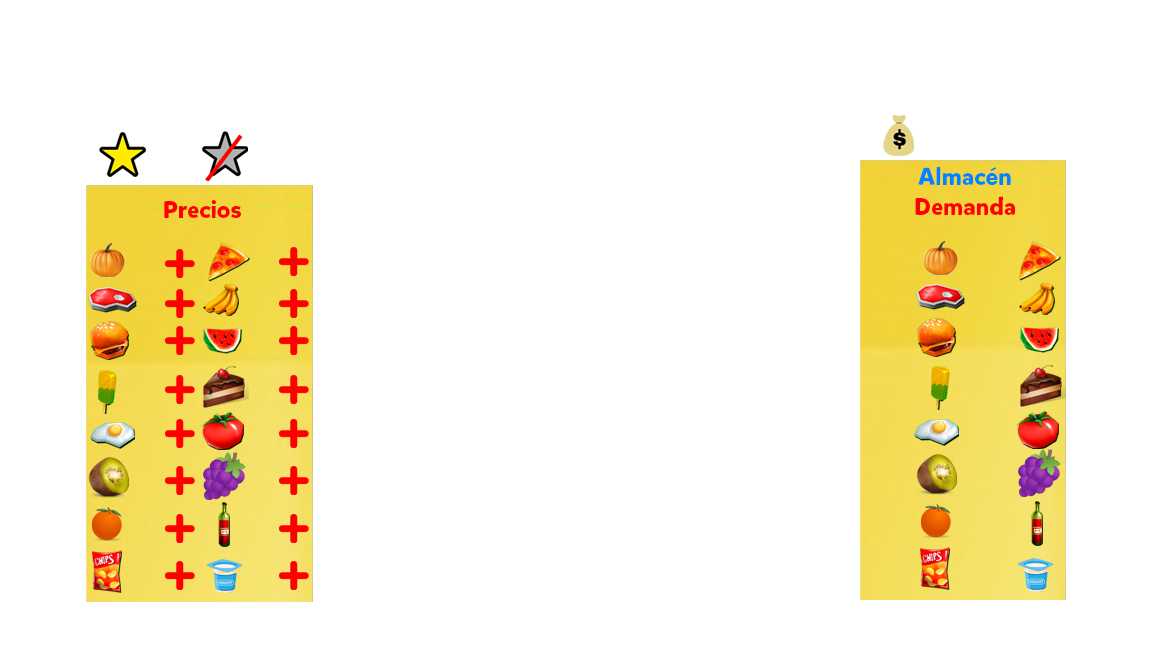
<style>
.page{position:relative;width:1152px;height:648px;background:#ffffff}
.page>*{position:absolute;margin:0}
.t1{font:24px "MikadoBoldDEMO";color:#0084ff}
.t2{font:24px "FranklinGothic-Demi";color:#0084ff}
.t3{font:24px "MikadoBoldDEMO";color:#ff0000}
</style>
<div class="page">
<p class="t1" style="left:918px;top:167px;width:93px;height:18px">Almac<span class="t2">é</span>n</p>
<p class="t3" style="left:915px;top:196px;width:100px;height:19px">Demanda</p>
<p class="t3" style="left:164px;top:200px;width:77px;height:18px">Precios</p>
</div>
